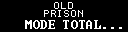
<style>
.page{position:relative;width:128px;height:32px;background:#000000}
.page>*{position:absolute;margin:0}
.t1{font:10px/8px "Terminal";letter-spacing:-0.05em;color:#ffffff}
.t2{font:12px "Terminal";letter-spacing:0.025em;color:#ffffff}
</style>
<div class="page">
<p class="t1" style="left:44px;top:2px;width:39px;height:15px;text-align:center">OLD<br>PRISON</p>
<p class="t2" style="left:25px;top:20px;width:97px;height:9px">MODE TOTAL...</p>
</div>
